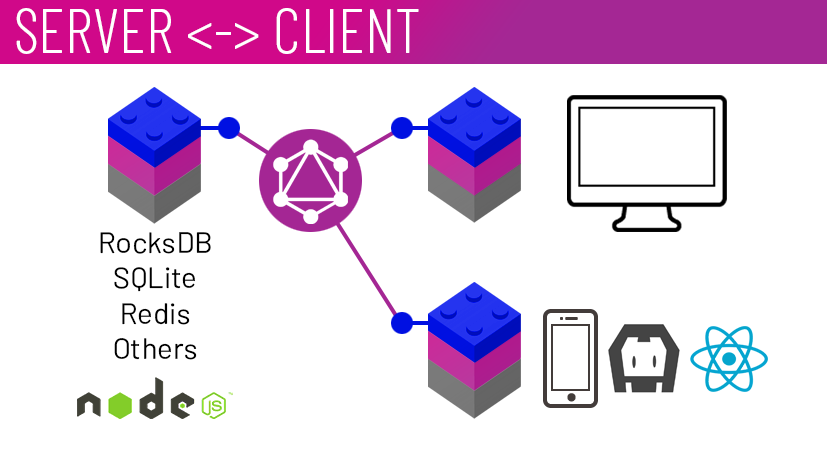
<style>
.page{position:relative;width:827px;height:450px;background:#ffffff}
.page>*{position:absolute;margin:0}
.t1{font:62.5px "BarlowCondensed-Light";color:#ffffff}
.t2{font:29.4px "Barlow-Regular";color:#000000}
</style>
<div class="page">
<p class="t1" style="left:16px;top:8px;width:403px;height:46px">SERVER &lt;-&gt; CLIENT</p>
<p class="t2" style="left:100px;top:232px;width:111px;height:128px;text-align:center">RocksDB<br>SQLite<br>Redis<br>Others</p>
</div>
